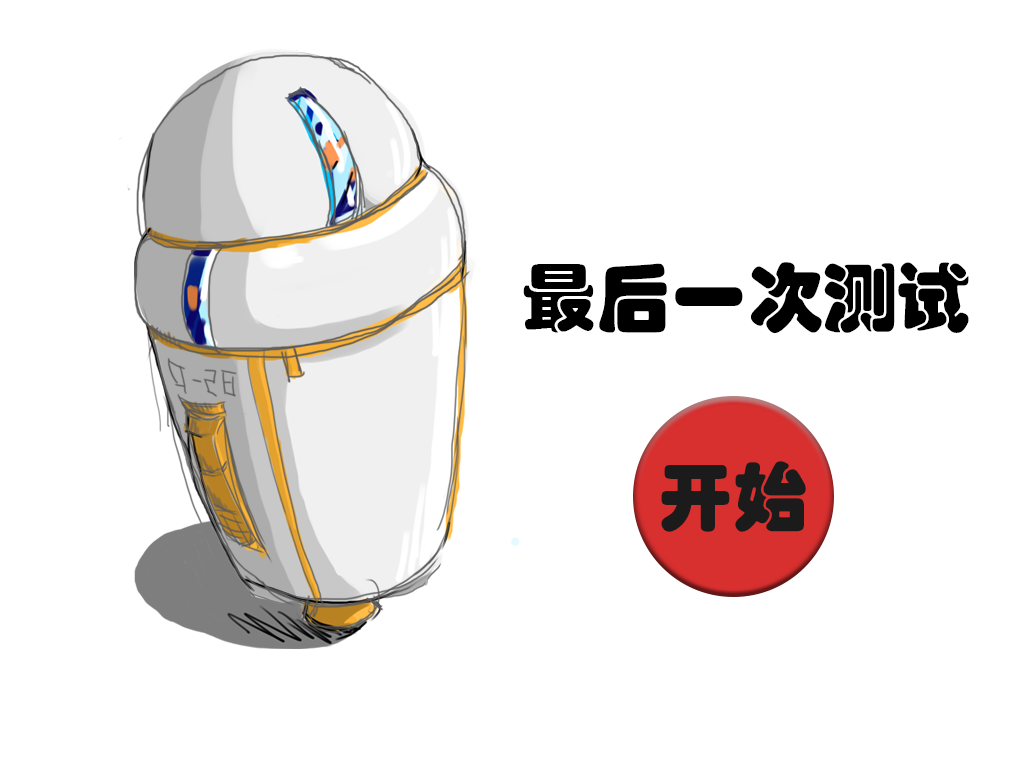
<style>
.page{position:relative;width:1024px;height:768px;background:#ffffff}
.page>*{position:absolute;margin:0}
.t1{font:75px "STHupo";color:#000000}
.t2{font:75px "STHupo";color:#1b1b1b}
</style>
<div class="page">
<p class="t1" style="left:523px;top:262px;width:446px;height:72px">最后一次测试</p>
<p class="t2" style="left:661px;top:461px;width:145px;height:71px">开始</p>
</div>
